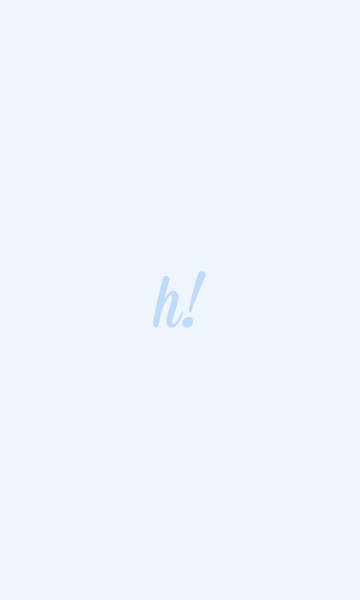
<style>
.page{position:relative;width:360px;height:600px;background:#eef5fc}
.page>*{position:absolute;margin:0}
.t1{font:72px "Mission-Script";color:#c0dbf9}
</style>
<div class="page">
<p class="t1" style="left:153px;top:271px;width:53px;height:57px">h!</p>
</div>
